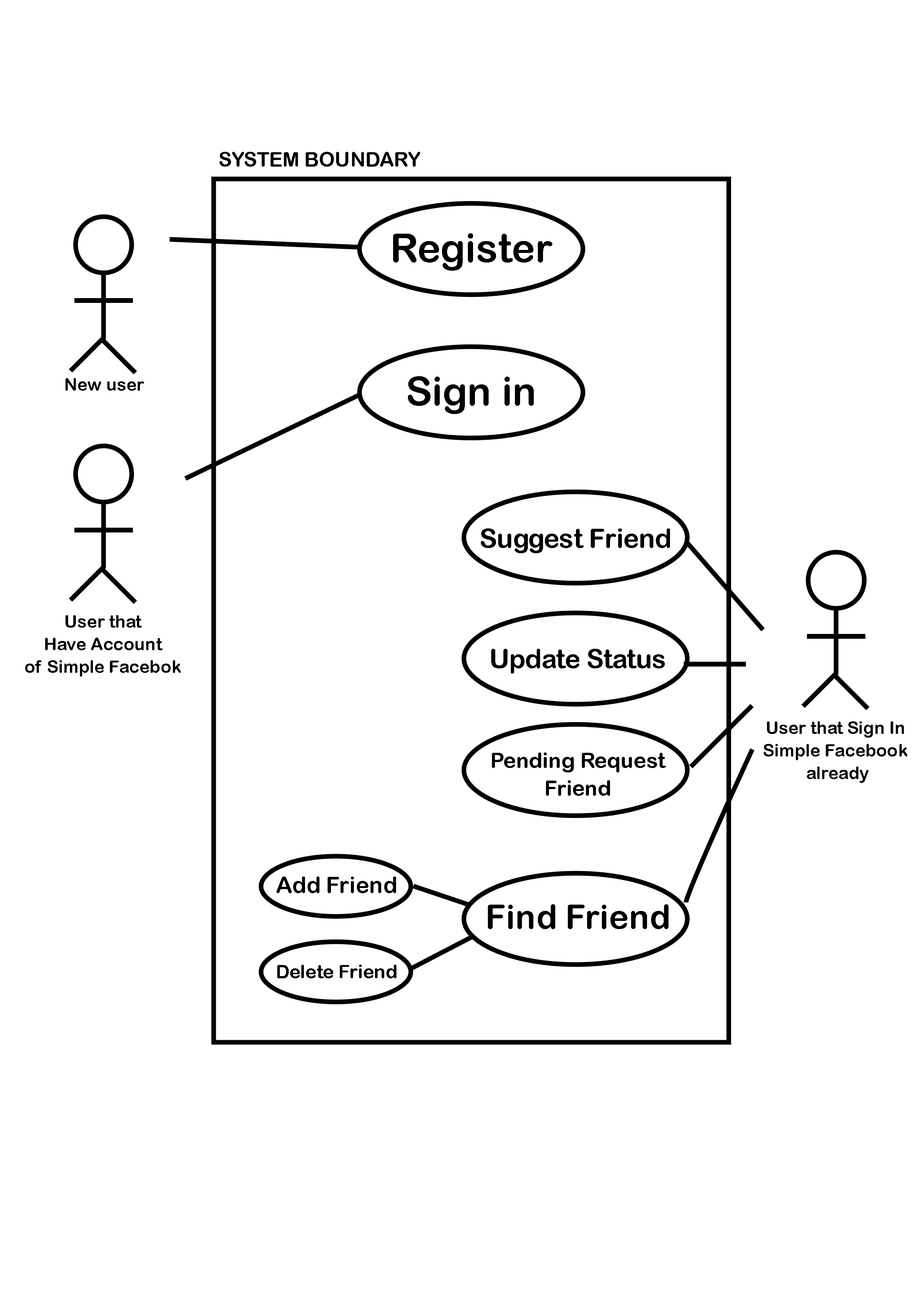
<style>
.page{position:relative;width:918px;height:1299px;background:#ffffff}
.page>*{position:absolute;margin:0}
.t1{font:20.3px "ArialRoundedMTBold";color:#000000}
.t2{font:40px "ArialRoundedMTBold";color:#000000}
.t3{font:17.6px "ArialRoundedMTBold";color:#000000}
.t4{font:26.5px "ArialRoundedMTBold";color:#000000}
.t5{font:17.6px/22.6px "ArialRoundedMTBold";color:#000000}
.t6{font:26.2px "ArialRoundedMTBold";color:#000000}
.t7{font:21.5px/27.6px "ArialRoundedMTBold";color:#000000}
.t8{font:23.1px "ArialRoundedMTBold";color:#000000}
.t9{font:33.8px "ArialRoundedMTBold";color:#000000}
.t10{font:18.9px "ArialRoundedMTBold";color:#000000}
</style>
<div class="page">
<p class="t1" style="left:220px;top:152px;width:200px;height:15px">SYSTEM BOUNDARY</p>
<p class="t2" style="left:393px;top:233px;width:159px;height:38px">Register</p>
<p class="t3" style="left:66px;top:378px;width:78px;height:13px">New user</p>
<p class="t2" style="left:408px;top:376px;width:126px;height:38px">Sign in</p>
<p class="t4" style="left:481px;top:528px;width:189px;height:25px">Suggest Friend</p>
<p class="t5" style="left:25px;top:615px;width:156px;height:61px;text-align:center">User that<br>Have Account<br>of Simple Facebok</p>
<p class="t6" style="left:491px;top:649px;width:174px;height:24px">Update Status</p>
<p class="t5" style="left:764px;top:721px;width:143px;height:62px;text-align:center">User that Sign In<br>Simple Facebook<br> already</p>
<p class="t7" style="left:492px;top:752px;width:174px;height:44px;text-align:center">Pending Request<br>Friend</p>
<p class="t8" style="left:277px;top:876px;width:119px;height:17px">Add Friend</p>
<p class="t9" style="left:488px;top:904px;width:181px;height:25px">Find Friend</p>
<p class="t10" style="left:277px;top:964px;width:120px;height:14px">Delete Friend</p>
</div>
